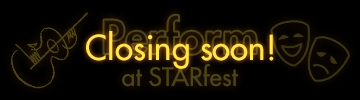
<style>
.page{position:relative;width:360px;height:100px;background:#000000}
.page>*{position:absolute;margin:0}
.t1{font:33.3px "FuturaStd-Medium";color:#ffe64d}
.t2{font:25px "FuturaStd-Medium";color:#4d4517}
</style>
<div class="page">
<p class="t1" style="left:86px;top:31px;width:188px;height:38px">Closing soon!</p>
<p class="t2" style="left:122px;top:64px;width:116px;height:23px">at STARfest</p>
</div>
